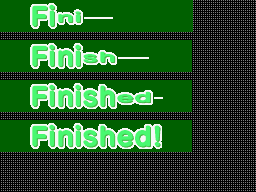
<style>
.page{position:relative;width:256px;height:192px;background:#000000}
.page>*{position:absolute;margin:0}
.t1{font:26px/40px "SeuratPro-EB";letter-spacing:0.025em;color:#48f870}
.t2{font:13px/40px "SeuratPro-EB";letter-spacing:0.025em;color:#48f870;scale:2 1}
</style>
<div class="page">
<p class="t1" style="left:32px;top:4px;width:128px;height:143px">Fi<span class="t2">ni<br></span>Fini<span class="t2">sh<br></span>Finish<span class="t2">ed<br></span>Finished!</p>
</div>
